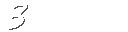
<style>
.page{position:relative;width:128px;height:32px;background:#ffffff}
.page>*{position:absolute;margin:0}
.t1{font:43px "DomDiagonalBT-Regular";letter-spacing:0.075em;color:#ffffff;scale:1.05 1}
</style>
<div class="page">
<p class="t1" style="left:7px;top:2px;width:21px;height:28px">3</p>
</div>
